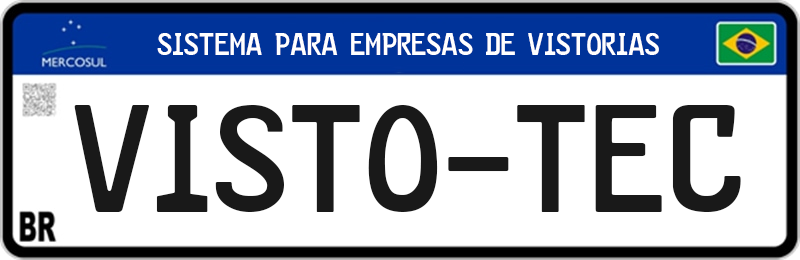
<style>
.page{position:relative;width:800px;height:260px;background:#ffffff}
.page>*{position:absolute;margin:0}
.t1{font:24px "FE-Font";color:#ffffff}
.t2{font:120px "FE-Font";color:#191919}
</style>
<div class="page">
<p class="t1" style="left:157px;top:33px;width:502px;height:22px">SIstema para empresas de vistorias</p>
<p class="t2" style="left:74px;top:105px;width:667px;height:107px">VISTO-TEC</p>
</div>
